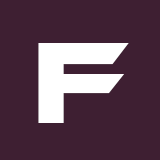
<style>
.page{position:relative;width:160px;height:160px;background:#3e1f32}
.page>*{position:absolute;margin:0}
.t1{font:120px "EthnocentricRg-Regular";color:#ffffff}
</style>
<div class="page">
<p class="t1" style="left:38px;top:43px;width:91px;height:80px">f</p>
</div>
